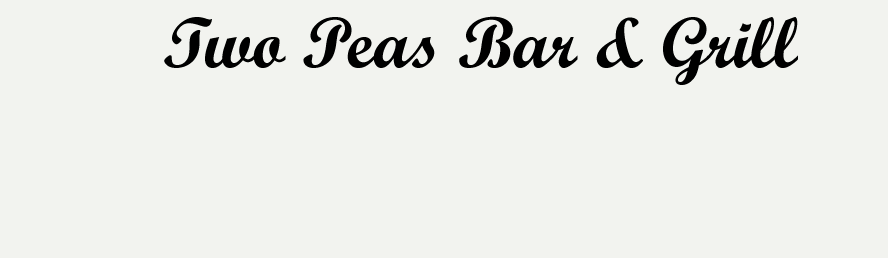
<style>
.page{position:relative;width:888px;height:258px;background:#f2f3ef}
.page>*{position:absolute;margin:0}
.t1{font:72px "ScriptMTBold";color:#000000}
.t2{font:72px "FrenchScriptMT";color:#000000}
</style>
<div class="page">
<p class="t1" style="left:164px;top:16px;width:634px;height:69px"><span class="t2"> </span>Two Peas Bar &amp; Grill</p>
</div>
